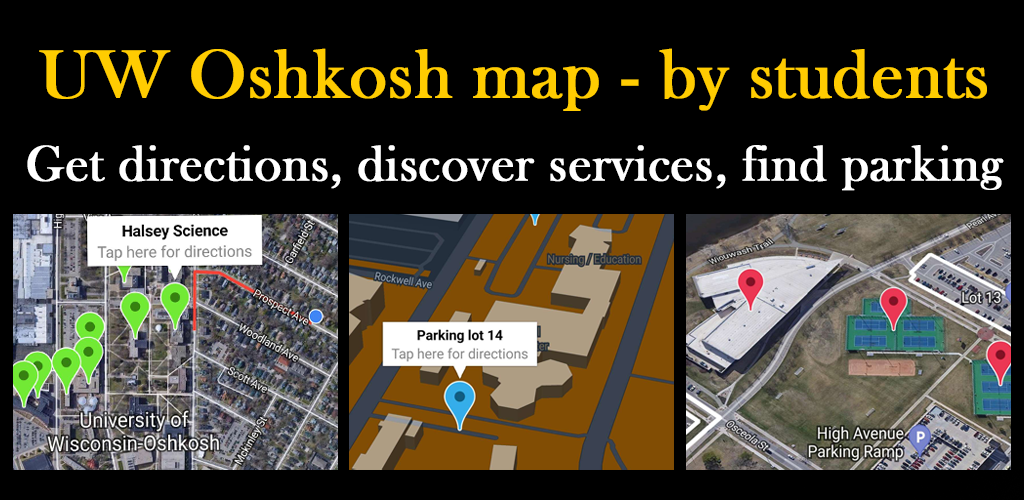
<style>
.page{position:relative;width:1024px;height:500px;background:#000000}
.page>*{position:absolute;margin:0}
.t1{font:70.2px "BaskOldFace";color:#ffcc01;font-weight:bold}
.t2{font:51px "BaskOldFace";color:#ffffff;font-weight:bold}
</style>
<div class="page">
<p class="t1" style="left:39px;top:48px;width:948px;height:63px">UW Oshkosh map - by students</p>
<p class="t2" style="left:27px;top:145px;width:977px;height:46px">Get directions, discover services, find parking</p>
</div>
